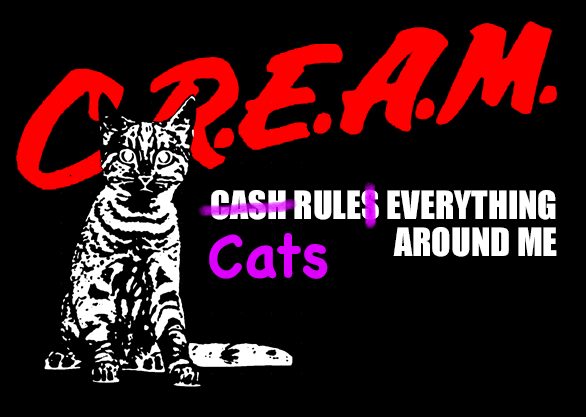
<style>
.page{position:relative;width:586px;height:417px;background:#000000}
.page>*{position:absolute;margin:0}
.t1{font:36px/37px "Impact";color:#ffffff;text-transform:uppercase}
.t2{font:60px "ChalkboardSE-Bold";color:#de00ff}
</style>
<div class="page">
<p class="t1" style="left:211px;top:190px;width:346px;height:67px;text-align:right">Cash Rules Everything<br>Around Me</p>
<p class="t2" style="left:209px;top:233px;width:119px;height:46px">Cats</p>
</div>
